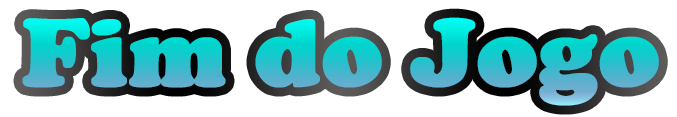
<style>
.page{position:relative;width:677px;height:117px;background:#ffffff}
.page>*{position:absolute;margin:0}
.t1{font:99.1px "CooperBlack";font-weight:bold}
</style>
<div class="page">
<p class="t1" style="left:22px;top:17px;width:637px;height:89px">Fim do Jogo</p>
</div>
